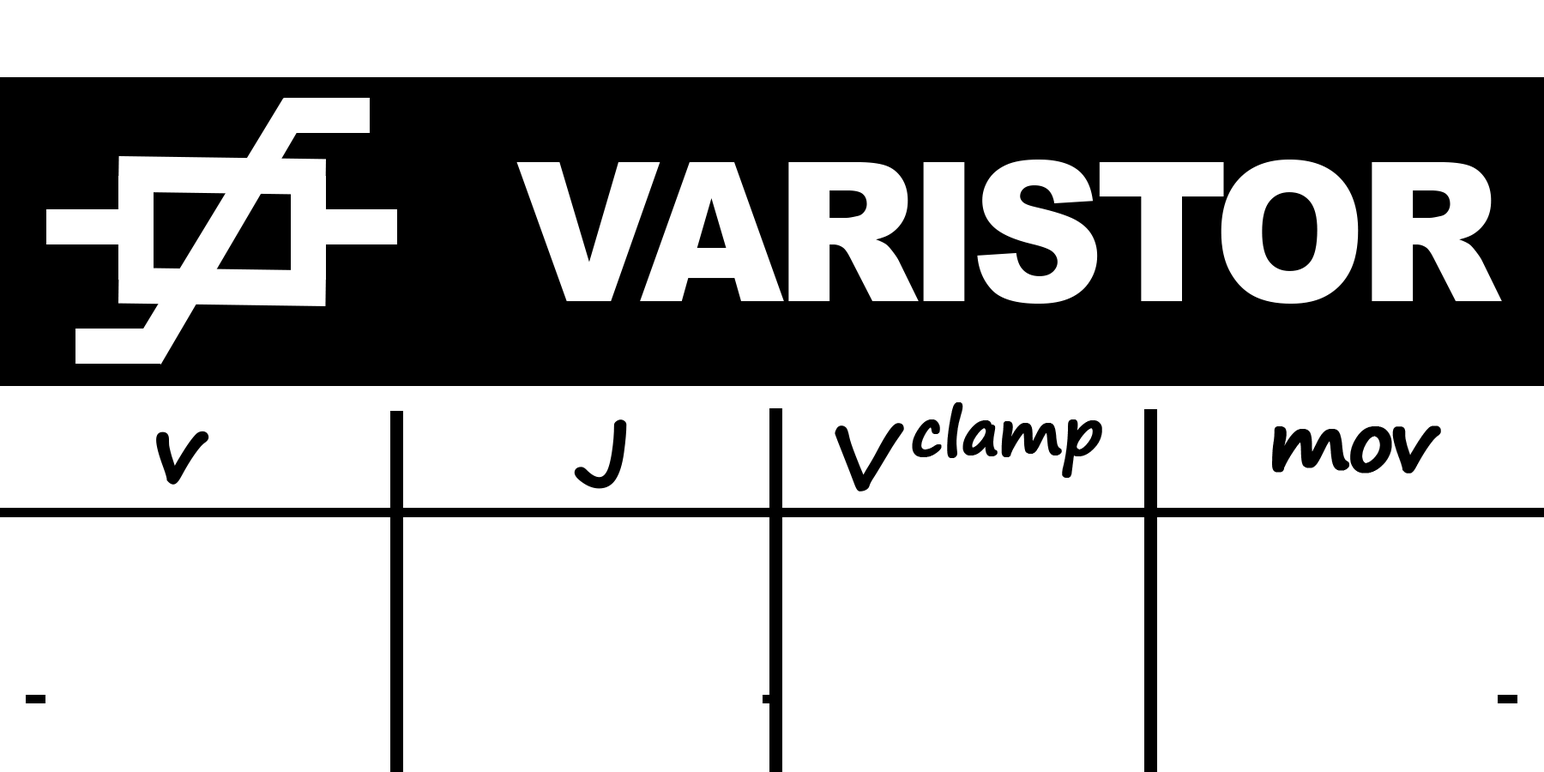
<style>
.page{position:relative;width:1544px;height:772px;background:#ffffff}
.page>*{position:absolute;margin:0}
.t1{font:193.9px "Arial-Black";letter-spacing:-0.05em;color:#ffffff;scale:0.95 1}
.t2{font:109px "SegoePrint-Bold";letter-spacing:-0.025em;color:#000000;font-weight:bold}
.t3{font:90.8px "SegoePrint-Bold";letter-spacing:-0.15em;color:#000000;font-weight:bold}
.t4{font:81.7px "SegoePrint-Bold";letter-spacing:-0.05em;color:#000000;font-weight:bold}
</style>
<div class="page">
<p class="t1" style="left:516px;top:160px;width:986px;height:144px">VARISTOR</p>
<p class="t2" style="left:835px;top:402px;width:267px;height:90px"><span class="t3">V </span>clamp</p>
<p class="t3" style="left:574px;top:420px;width:53px;height:69px">J</p>
<p class="t4" style="left:1272px;top:426px;width:169px;height:48px">mov</p>
<p class="t3" style="left:156px;top:431px;width:53px;height:54px">v</p>
</div>
